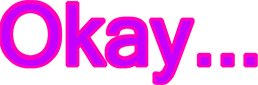
<style>
.page{position:relative;width:258px;height:85px;background:#ffffff}
.page>*{position:absolute;margin:0}
.t1{font:83.8px "MicrosoftSansSerif";color:#c400ff}
</style>
<div class="page">
<p class="t1" style="left:1px;top:4px;width:254px;height:79px">Okay...</p>
</div>
